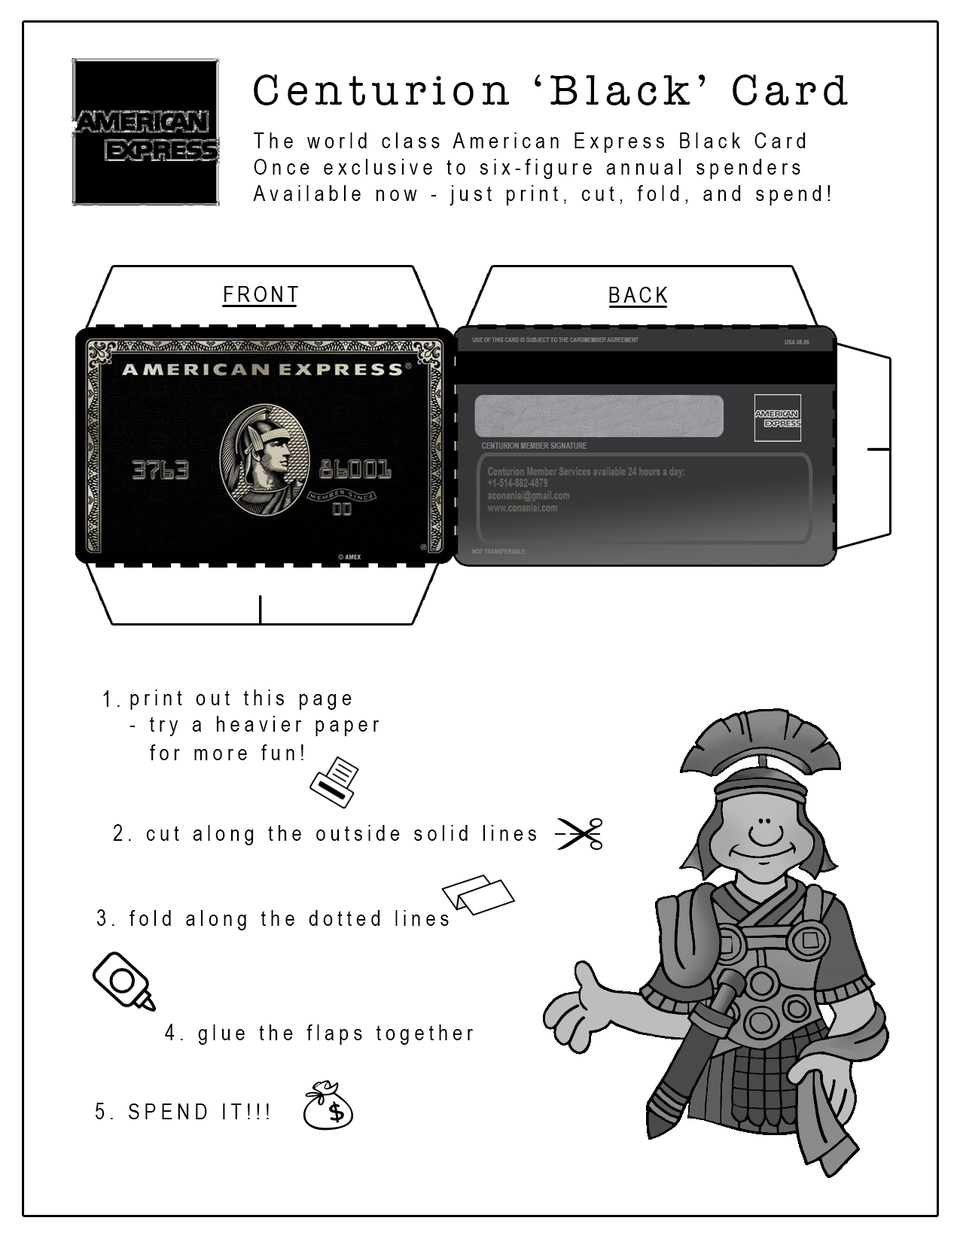
<style>
.page{position:relative;width:960px;height:1242px;background:#ffffff}
.page>*{position:absolute;margin:0}
.t1{font:43.3px "AmericanTypewriter";letter-spacing:0.15em;color:#000000}
.t2{font:22px "ArialNarrow";letter-spacing:0.2em;color:#000000}
</style>
<div class="page">
<p class="t1" style="left:254px;top:75px;width:594px;height:30px">Centurion ‘Black’ Card</p>
<p class="t2" style="left:253px;top:133px;width:577px;height:73px">The world class American Express Black Card<br>Once exclusive to six-figure annual spenders<br>Available now - just print, cut, fold, and spend!</p>
<p class="t2" style="left:129px;top:690px;width:250px;height:46px">print out this page <br> - try a heavier paper</p>
<p class="t2" style="left:103px;top:690px;width:17px;height:17px">1.</p>
<p class="t2" style="left:150px;top:745px;width:153px;height:15px">for more fun!</p>
<p class="t2" style="left:113px;top:824px;width:423px;height:21px">2. cut along the outside solid lines</p>
<p class="t2" style="left:96px;top:909px;width:353px;height:22px">3. fold along the dotted lines</p>
<p class="t2" style="left:165px;top:1024px;width:309px;height:21px">4. glue the flaps together</p>
<p class="t2" style="left:95px;top:1103px;width:174px;height:17px">5. SPEND IT!!!</p>
</div>
